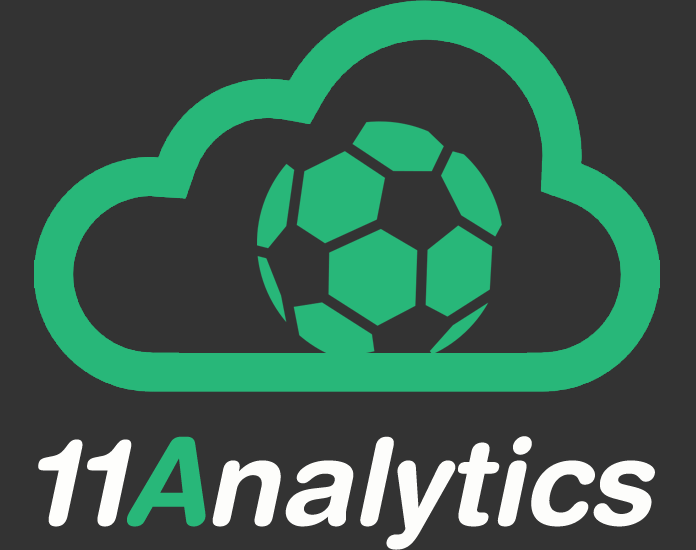
<style>
.page{position:relative;width:696px;height:550px;background:#333333}
.page>*{position:absolute;margin:0}
.t1{font:120px "HelveticaRoundedLTStd-BdO";color:#fdfdfb}
.t2{font:120px "HelveticaRoundedLTStd-BdO";color:#fefefc}
.t3{font:120px "HelveticaRoundedLTStd-BdO";color:#28b779}
</style>
<div class="page">
<p class="t1" style="left:38px;top:436px;width:617px;height:114px"><span class="t2">11</span><span class="t3">A</span>nalytics</p>
</div>
